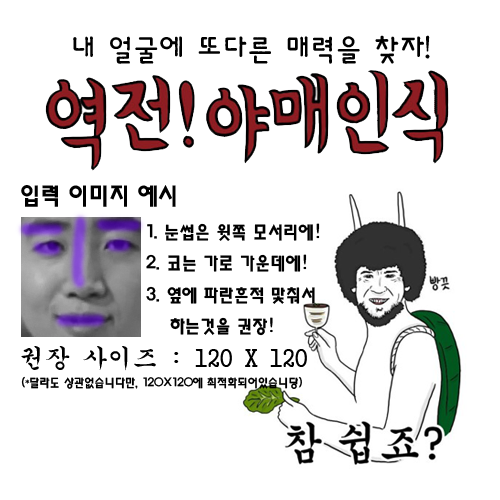
<style>
.page{position:relative;width:500px;height:500px;background:#ffffff}
.page>*{position:absolute;margin:0}
.t1{font:30px "HaanBaekjeM";color:#000000}
.t2{font:24px "HaanYHeadM";color:#000000}
.t3{font:18px "HaanYHeadM";color:#000000}
.t4{font:25px "GungsuhChe";color:#000000}
.t5{font:12px "HaanYHeadM";color:#000000}
</style>
<div class="page">
<p class="t1" style="left:73px;top:35px;width:357px;height:29px">내 얼굴에 또다른 매력을 찾자!</p>
<p class="t2" style="left:21px;top:185px;width:155px;height:22px">입력 이미지 예시</p>
<p class="t3" style="left:146px;top:223px;width:174px;height:113px">1. 눈썹은 윗쪽 모서리에!<br>2. 코는 가로 가운데에!<br>3. 옆에 파란흔적 맟춰서 <br>    하는것을 권장!</p>
<p class="t4" style="left:21px;top:346px;width:286px;height:25px">권장 사이즈 : 120 X 120</p>
<p class="t5" style="left:21px;top:376px;width:281px;height:13px">(*달라도 상관없습니다만, 120X120에 최적화되어있습니당)</p>
</div>
